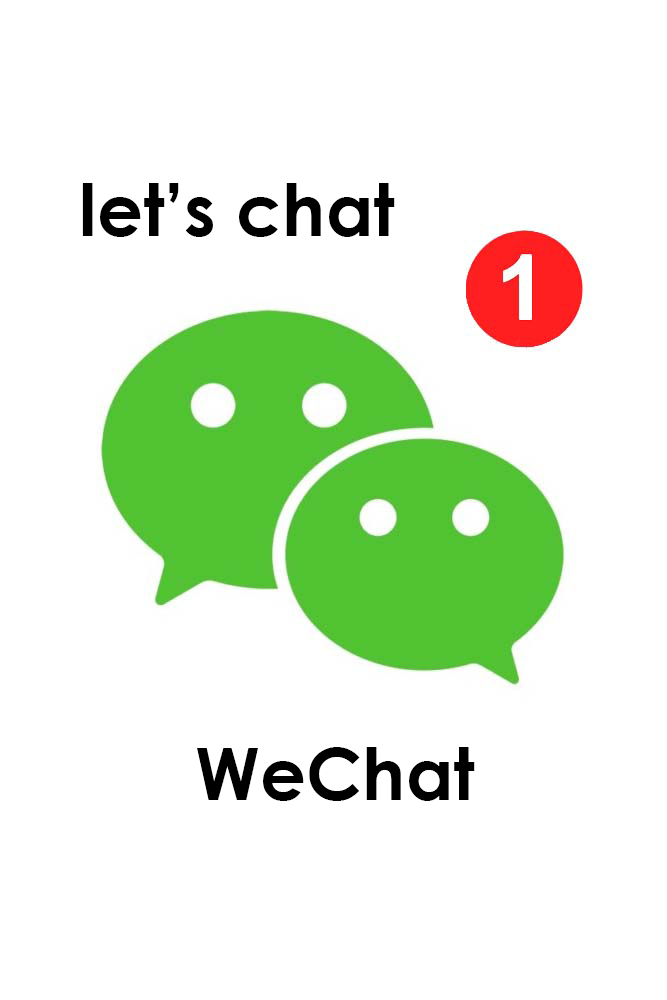
<style>
.page{position:relative;width:667px;height:1000px;background:#ffffff}
.page>*{position:absolute;margin:0}
.t1{font:72px "CenturyGothic-Bold";color:#000000}
</style>
<div class="page">
<p class="t1" style="left:82px;top:183px;width:313px;height:54px">let’s chat</p>
<p class="t1" style="left:197px;top:747px;width:278px;height:54px">WeChat</p>
</div>
